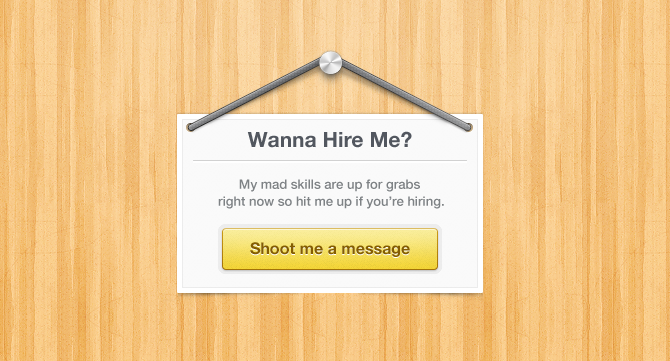
<style>
.page{position:relative;width:670px;height:361px}
.page>*{position:absolute;margin:0}
.t1{font:21px "HelveticaNeue-Bold";color:#52575f}
.t2{font:13px/17px "HelveticaNeue-Medium";color:#7e8285}
.t3{font:16px "HelveticaNeue-Bold";color:#845d01}
</style>
<div class="page">
<p class="t1" style="left:247px;top:131px;width:165px;height:17px">Wanna Hire Me?</p>
<p class="t2" style="left:218px;top:179px;width:226px;height:30px;text-align:center">My mad skills are up for grabs <br> right now so hit me up if you’re hiring.</p>
<p class="t3" style="left:250px;top:242px;width:160px;height:15px">Shoot me a message</p>
</div>
